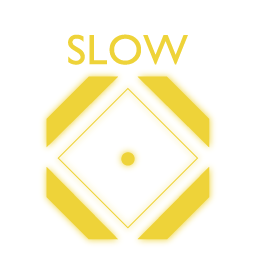
<style>
.page{position:relative;width:256px;height:256px;background:#ffffff}
.page>*{position:absolute;margin:0}
.t1{font:42.7px "GillSansMT";letter-spacing:0.01em;color:#eed339}
</style>
<div class="page">
<p class="t1" style="left:68px;top:34px;width:120px;height:31px">SLOW</p>
</div>
